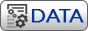
<style>
.page{position:relative;width:88px;height:31px}
.page>*{position:absolute;margin:0}
.t1{font:19px "Avenir-Roman";color:#003699;font-weight:bold;scale:1.06 1}
</style>
<div class="page">
<p class="t1" style="left:31px;top:9px;width:53px;height:14px">DATA</p>
</div>
